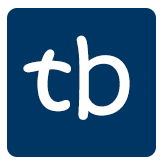
<style>
.page{position:relative;width:165px;height:166px;background:#003663}
.page>*{position:absolute;margin:0}
.t1{font:100px "KristenITC-Regular";color:#ffffff}
</style>
<div class="page">
<p class="t1" style="left:23px;top:35px;width:107px;height:85px">tb</p>
</div>
